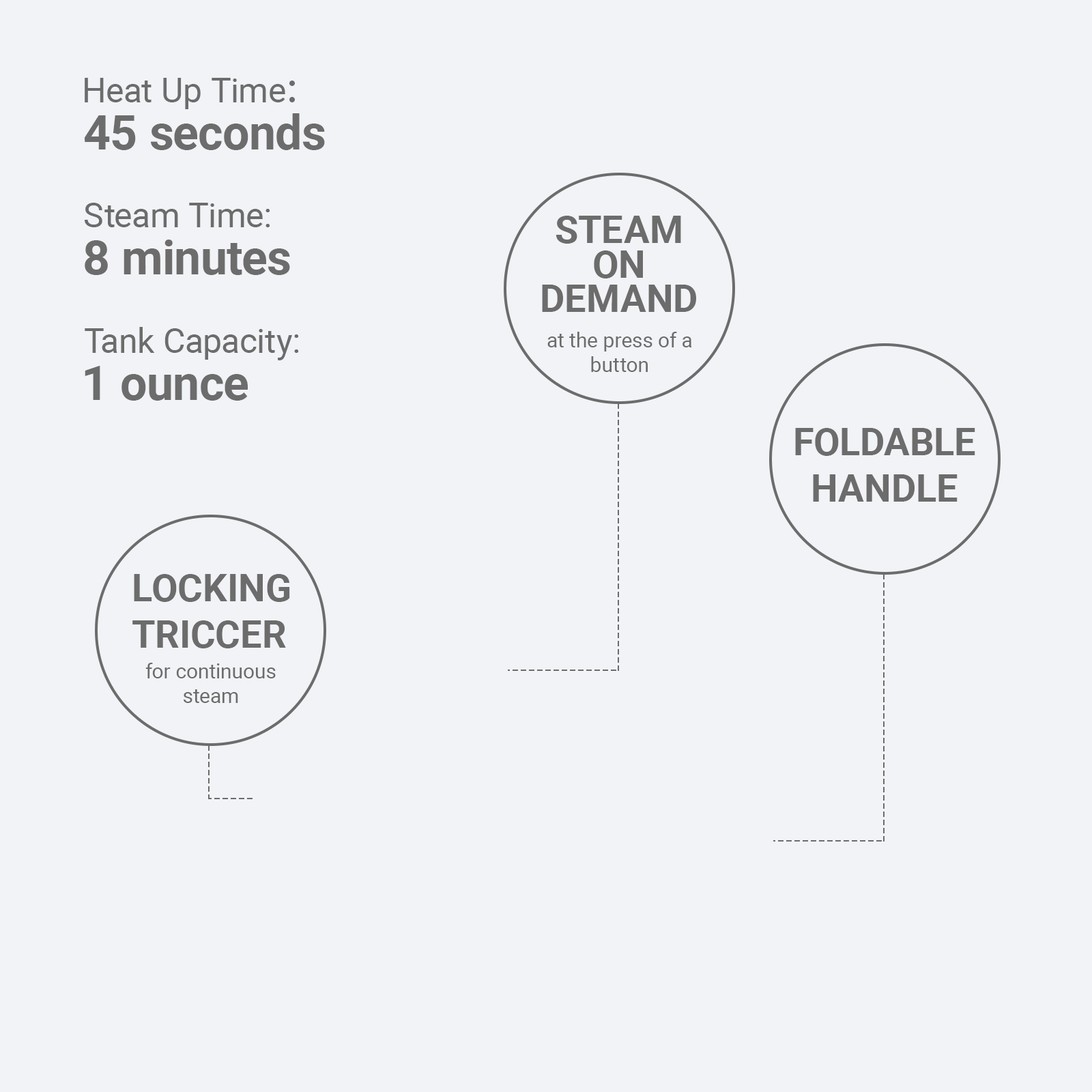
<style>
.page{position:relative;width:1092px;height:1092px;background:#f2f3f6}
.page>*{position:absolute;margin:0}
.t1{font:34.1px "Roboto-Regular";color:#6c6c6c}
.t2{font:34.1px "AdobeHeitiStd-Regular";color:#6c6c6c}
.t3{font:47.8px "Roboto-Bold";color:#6c6c6c}
.t4{font:38.2px/34.3px "Roboto-Bold";color:#6c6c6c}
.t5{font:20.5px "Roboto-Regular";color:#6c6c6c}
.t6{font:38.2px "Roboto-Bold";color:#6c6c6c}
</style>
<div class="page">
<p class="t1" style="left:85px;top:78px;width:210px;height:31px">Heat Up Time<span class="t2">：</span></p>
<p class="t3" style="left:84px;top:113px;width:241px;height:37px">45 seconds</p>
<p class="t1" style="left:85px;top:203px;width:185px;height:24px">Steam Time:</p>
<p class="t4" style="left:542px;top:216px;width:154px;height:96px;text-align:center">STEAM<br>ON<br>DEMAND</p>
<p class="t3" style="left:85px;top:240px;width:205px;height:35px">8 minutes</p>
<p class="t1" style="left:85px;top:327px;width:214px;height:33px">Tank Capacity:</p>
<p class="t5" style="left:547px;top:332px;width:145px;height:40px;text-align:center">at the press of a<br>button</p>
<p class="t3" style="left:85px;top:366px;width:163px;height:35px">1 ounce</p>
<p class="t6" style="left:795px;top:428px;width:180px;height:74px;text-align:center">FOLDABLE<br>HANDLE</p>
<p class="t6" style="left:132px;top:574px;width:158px;height:74px">LOCKING<br>TRICCER</p>
<p class="t5" style="left:145px;top:663px;width:131px;height:40px;text-align:center">for continuous<br>steam</p>
</div>
